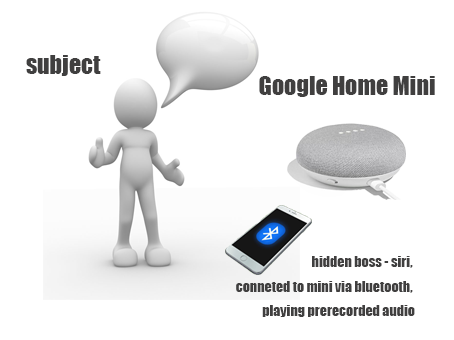
<style>
.page{position:relative;width:454px;height:340px;background:#ffffff}
.page>*{position:absolute;margin:0}
.t1{font:24px "Impact";color:#403f3f}
.t2{font:14px "Impact";color:#403f3f}
</style>
<div class="page">
<p class="t1" style="left:26px;top:55px;width:75px;height:21px">subject</p>
<p class="t1" style="left:259px;top:76px;width:176px;height:21px">Google Home Mini</p>
<p class="t2" style="left:236px;top:256px;width:179px;height:61px;text-align:right">hidden boss - siri, <br>conneted to mini via bluetooth, <br>playing prerecorded audio</p>
</div>
